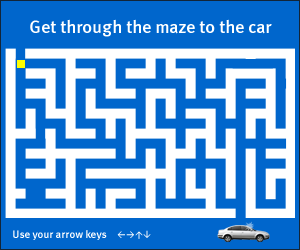
<style>
.page{position:relative;width:300px;height:250px;background:#0066cc}
.page>*{position:absolute;margin:0}
.t1{font:18px "MetaMediumLF-Roman";color:#ffffff}
.t2{font:11px "MetaMediumLF-Roman";color:#ffffff}
</style>
<div class="page">
<p class="t1" style="left:30px;top:19px;width:242px;height:18px">Get through the maze to the car</p>
<p class="t2" style="left:13px;top:230px;width:94px;height:10px">Use your arrow keys</p>
</div>
